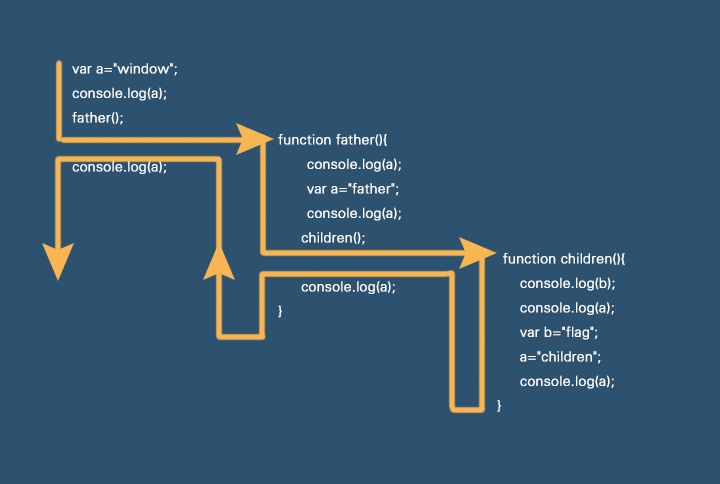
<style>
.page{position:relative;width:720px;height:484px;background:#2d526f}
.page>*{position:absolute;margin:0}
.t1{font:14px "FZXH1JW--GB1-0";color:#ffffff;font-weight:bold}
</style>
<div class="page">
<p class="t1" style="left:72px;top:63px;width:105px;height:111px">var a="window";<br>console.log(a);<br>father();<br><br>console.log(a);</p>
<p class="t1" style="left:278px;top:134px;width:123px;height:184px">function father(){<br>　　console.log(a);<br>　　var a="father";<br>　　console.log(a);<br>  　children();<br><br>  　console.log(a);<br>}</p>
<p class="t1" style="left:497px;top:253px;width:128px;height:159px">function children(){<br>     　　console.log(b);<br>     　　console.log(a);<br>     　　var b="flag";<br>     　　a="children";<br>     　　console.log(a);<br>   　}</p>
</div>
